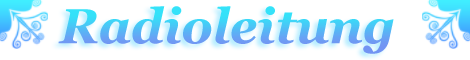
<style>
.page{position:relative;width:470px;height:60px;background:#ffffff}
.page>*{position:absolute;margin:0}
.t1{font:49px "Georgia-BoldItalic"}
</style>
<div class="page">
<p class="t1" style="left:58px;top:6px;width:336px;height:48px">Radioleitung</p>
</div>
